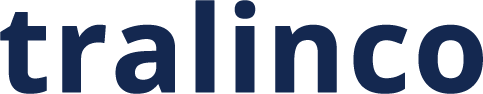
<style>
.page{position:relative;width:483px;height:94px;background:#ffffff}
.page>*{position:absolute;margin:0}
.t1{font:120px "OpenSans-Bold";color:#142850;font-weight:bold}
</style>
<div class="page">
<p class="t1" style="left:0px;top:0px;width:483px;height:94px">tralinco</p>
</div>
